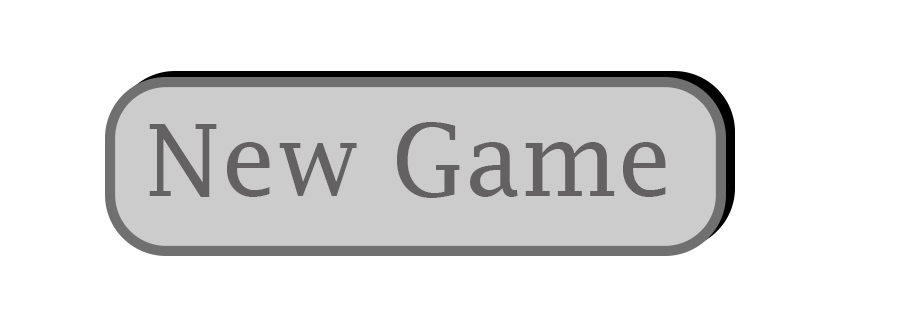
<style>
.page{position:relative;width:909px;height:319px;background:#ffffff}
.page>*{position:absolute;margin:0}
.t1{font:99.5px "LucidaFax";color:#636161}
</style>
<div class="page">
<p class="t1" style="left:149px;top:122px;width:517px;height:76px">New Game</p>
</div>
